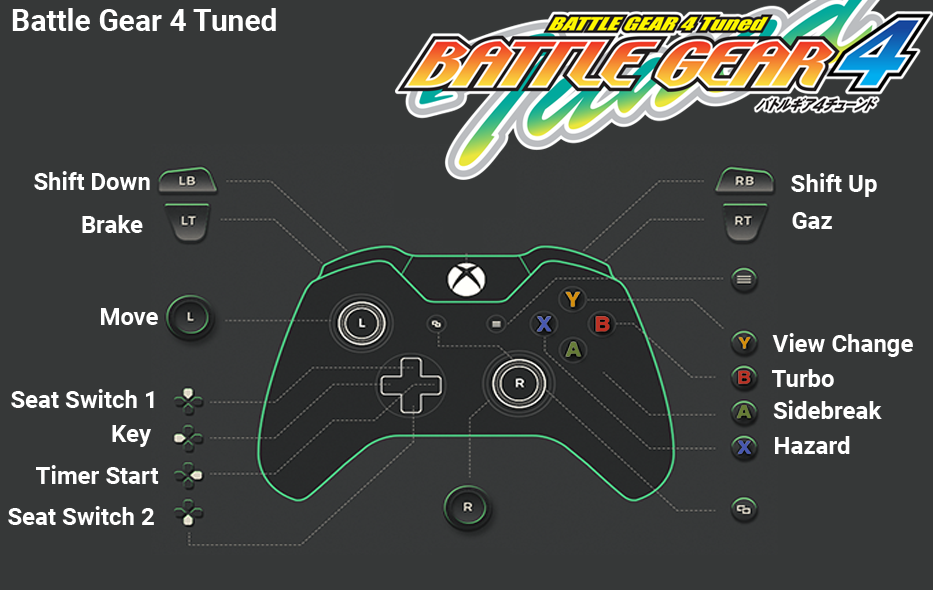
<style>
.page{position:relative;width:933px;height:590px;background:#363838}
.page>*{position:absolute;margin:0}
.t1{font:30px "Roboto-Bold";color:#ffffff}
.t2{font:24px "Roboto-Bold";color:#ffffff}
</style>
<div class="page">
<p class="t1" style="left:12px;top:8px;width:264px;height:23px">Battle Gear 4 Tuned</p>
<p class="t2" style="left:34px;top:171px;width:116px;height:19px">Shift Down</p>
<p class="t2" style="left:791px;top:173px;width:86px;height:24px">Shift Up</p>
<p class="t2" style="left:82px;top:215px;width:61px;height:18px">Brake</p>
<p class="t2" style="left:792px;top:212px;width:40px;height:17px">Gaz</p>
<p class="t2" style="left:101px;top:308px;width:57px;height:17px">Move</p>
<p class="t2" style="left:772px;top:333px;width:141px;height:24px">View Change</p>
<p class="t2" style="left:772px;top:369px;width:62px;height:18px">Turbo</p>
<p class="t2" style="left:11px;top:389px;width:143px;height:19px">Seat Switch 1</p>
<p class="t2" style="left:773px;top:400px;width:109px;height:19px">Sidebreak</p>
<p class="t2" style="left:112px;top:425px;width:39px;height:22px">Key</p>
<p class="t2" style="left:775px;top:436px;width:75px;height:18px">Hazard</p>
<p class="t2" style="left:36px;top:465px;width:123px;height:19px">Timer Start</p>
<p class="t2" style="left:8px;top:506px;width:146px;height:19px">Seat Switch 2</p>
</div>
